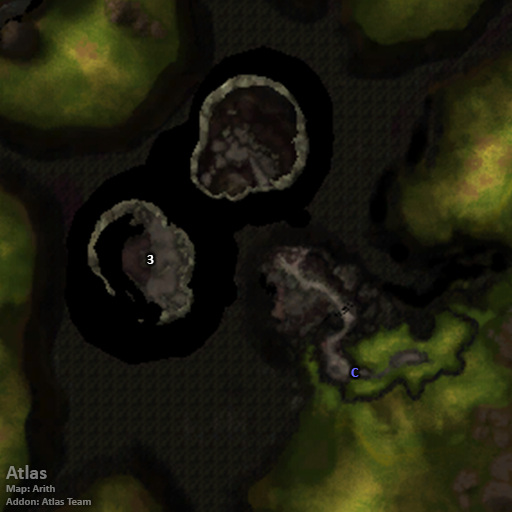
<style>
.page{position:relative;width:512px;height:512px}
.page>*{position:absolute;margin:0}
.t1{font:14px "Calibri-Bold";color:#ffffff}
.t2{font:14px "Calibri-Bold";color:#6666ff}
.t3{font:11px "Calibri-Bold";color:#787877}
.t4{font:20px "Calibri-Bold";color:#787877}
</style>
<div class="page">
<p class="t1" style="left:147px;top:255px;width:7px;height:9px">3</p>
<p class="t2" style="left:351px;top:368px;width:8px;height:9px">C</p>
<p class="t3" style="left:6px;top:465px;width:85px;height:40px"><span class="t4">Atlas<br></span>Map: Arith<br>Addon: Atlas Team</p>
</div>
